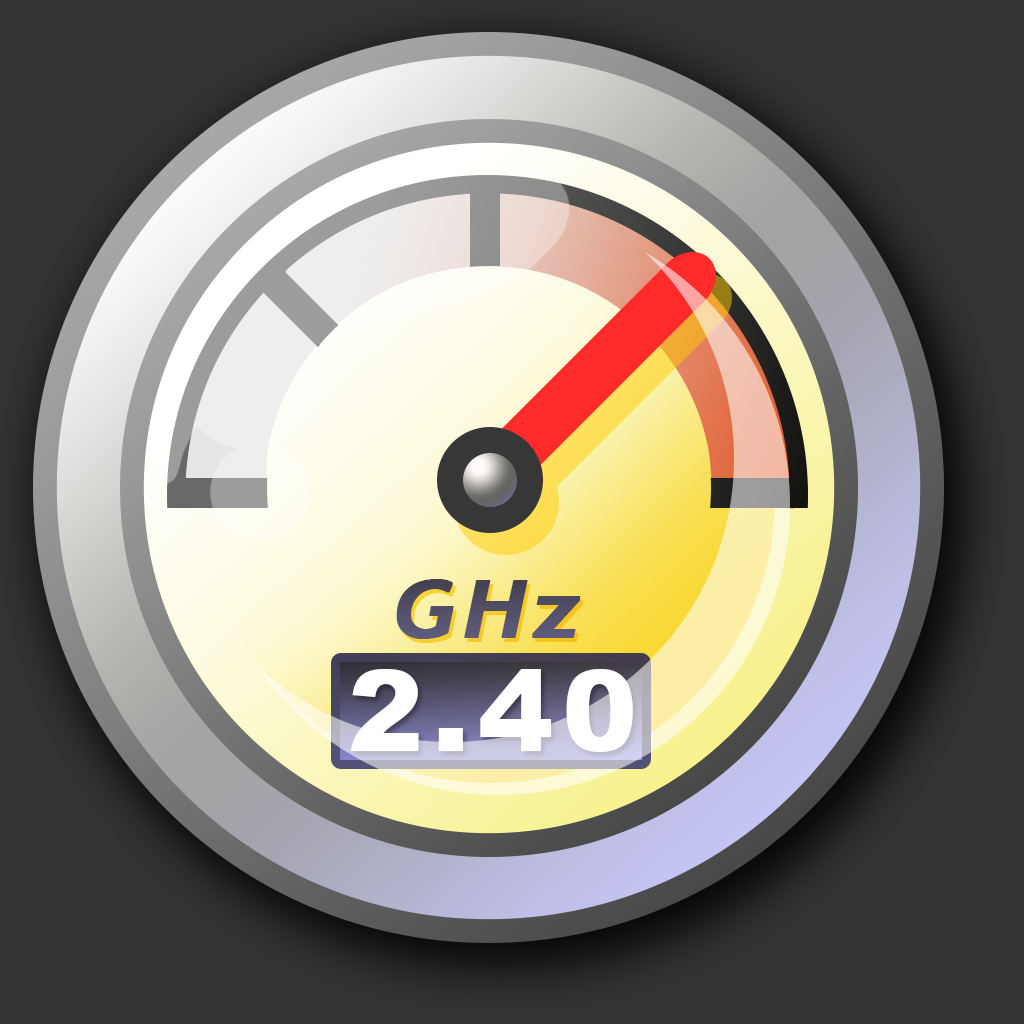
<style>
.page{position:relative;width:1024px;height:1024px;background:#333333}
.page>*{position:absolute;margin:0}
.t1{font:79.2px "Trebuchet-BoldItalic";letter-spacing:0.06em;color:#595672;font-weight:bold;scale:1.14 1}
.t2{font:112.5px "Arial-Black";letter-spacing:0.08em;color:#ffffff}
</style>
<div class="page">
<p class="t1" style="left:396px;top:579px;width:185px;height:60px">GHz</p>
<p class="t2" style="left:350px;top:669px;width:283px;height:83px">2.40</p>
</div>
